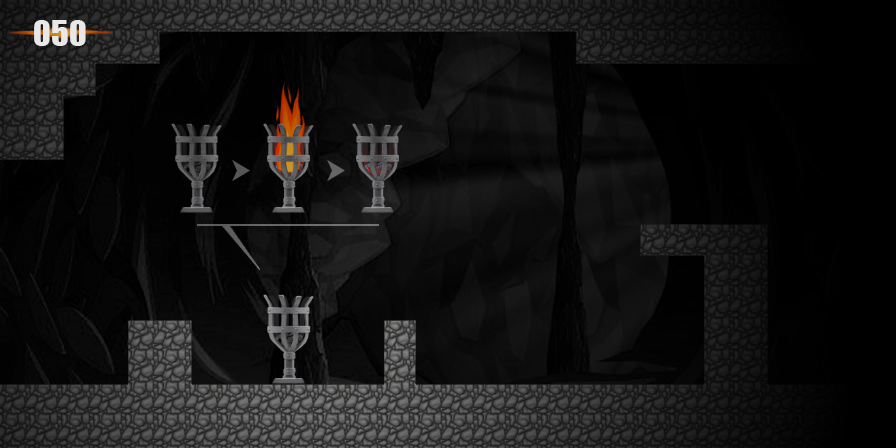
<style>
.page{position:relative;width:896px;height:448px}
.page>*{position:absolute;margin:0}
.t1{font:33.3px "Impact";color:#e8e8e8}
</style>
<div class="page">
<p class="t1" style="left:34px;top:20px;width:52px;height:26px">050</p>
</div>
